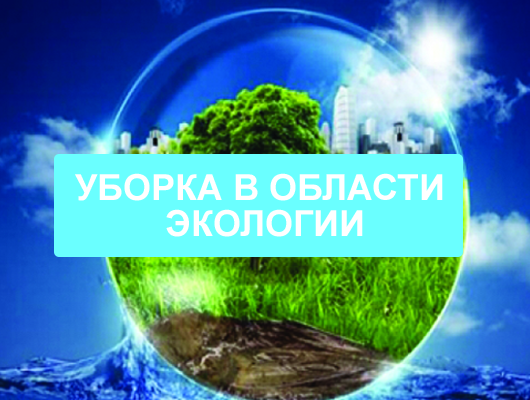
<style>
.page{position:relative;width:530px;height:400px}
.page>*{position:absolute;margin:0}
.t1{font:36px/36px "Arial-BoldMT";color:#ffffff;text-transform:uppercase}
</style>
<div class="page">
<p class="t1" style="left:75px;top:173px;width:368px;height:64px;text-align:center">уборка в области <br>экологии</p>
</div>
